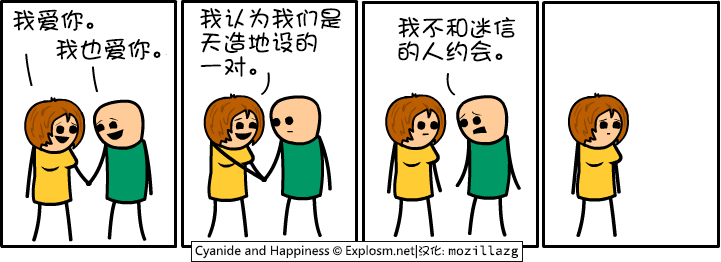
<style>
.page{position:relative;width:721px;height:262px;background:#ffffff}
.page>*{position:absolute;margin:0}
.t1{font:24px "DFShaoNvW5";color:#000000}
.t2{font:24px/24px "DFShaoNvW5";color:#000000}
</style>
<div class="page">
<p class="t1" style="left:13px;top:9px;width:81px;height:22px">我爱你。</p>
<p class="t2" style="left:200px;top:7px;width:142px;height:70px">我认为我们是<br>天造地设的<br>一对。</p>
<p class="t2" style="left:398px;top:16px;width:118px;height:46px">我不和迷信<br>的人约会。</p>
<p class="t1" style="left:56px;top:38px;width:105px;height:22px">我也爱你。</p>
</div>
